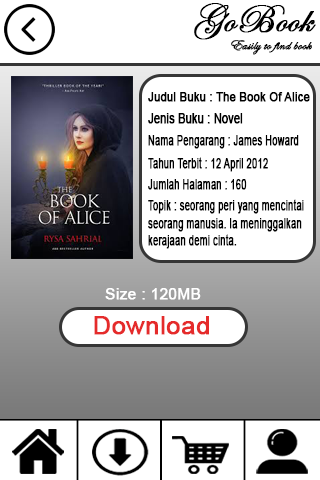
<style>
.page{position:relative;width:320px;height:480px;background:#ffffff}
.page>*{position:absolute;margin:0}
.t1{font:40px "EdwardianScriptITC";color:#000000;font-weight:bold}
.t2{font:14.3px "EdwardianScriptITC";color:#000000;font-weight:bold}
.t3{font:12.2px "ArialMT";color:#000000;font-weight:bold;scale:0.91 1}
.t4{font:14.4px "ArialMT";color:#000000;font-weight:bold;scale:0.75 1}
.t5{font:14.4px "ArialMT";color:#000000;font-weight:bold;scale:0.65 1}
.t6{font:15.3px "ArialMT";color:#ffffff;font-weight:bold}
.t7{font:25.3px "ArialMT";color:#e52b2b;font-weight:bold}
</style>
<div class="page">
<p class="t1" style="left:194px;top:3px;width:122px;height:37px">GoBook</p>
<p class="t2" style="left:231px;top:40px;width:81px;height:15px">Easily to find book</p>
<p class="t3" style="left:148px;top:92px;width:162px;height:10px">Judul Buku : The Book Of Alice</p>
<p class="t4" style="left:148px;top:113px;width:95px;height:11px">Jenis Buku : Novel</p>
<p class="t5" style="left:148px;top:135px;width:151px;height:14px">Nama Pengarang : James Howard</p>
<p class="t5" style="left:148px;top:157px;width:120px;height:15px">Tahun Terbit : 12 April 2012</p>
<p class="t5" style="left:148px;top:179px;width:99px;height:11px">Jumlah Halaman : 160</p>
<p class="t5" style="left:148px;top:199px;width:156px;height:50px">Topik : seorang peri yang mencintai<br>seorang manusia. Ia meninggalkan <br>kerajaan demi cinta.</p>
<p class="t6" style="left:105px;top:288px;width:96px;height:12px">Size : 120MB</p>
<p class="t7" style="left:94px;top:316px;width:115px;height:19px">Download</p>
</div>
